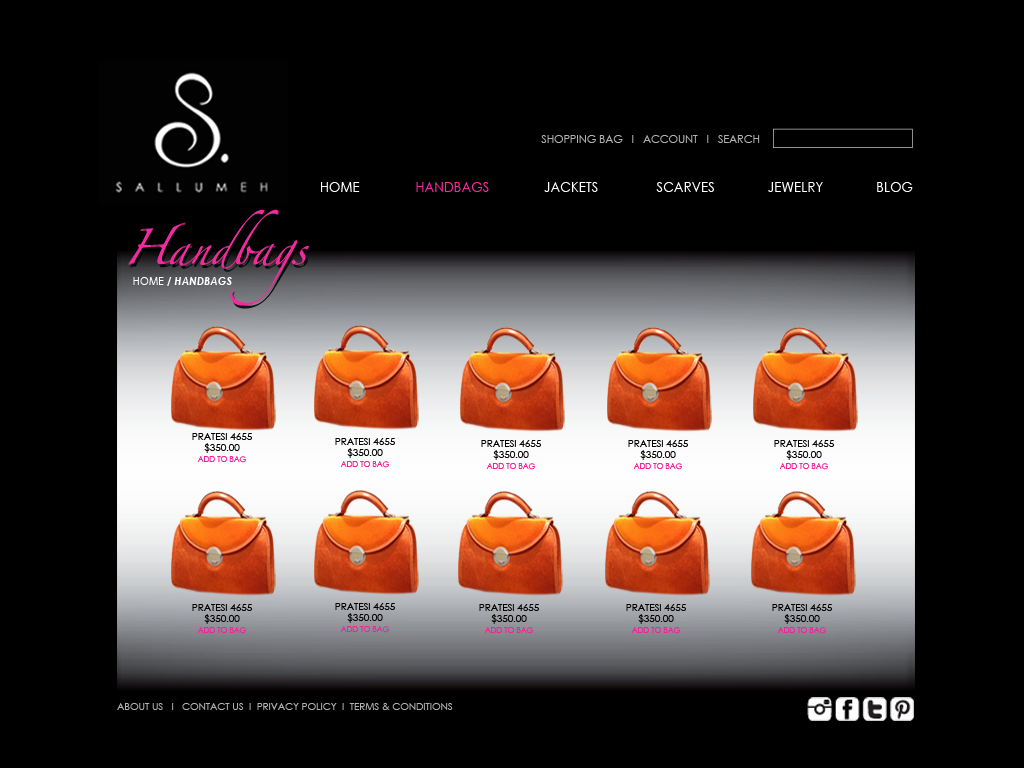
<style>
.page{position:relative;width:1024px;height:768px;background:#000000}
.page>*{position:absolute;margin:0}
.t1{font:10.9px "CenturyGothic";color:#b2b1b1}
.t2{font:14.2px "CenturyGothic";letter-spacing:0.025em;color:#ffffff;scale:0.9 1}
.t3{font:14.2px "CenturyGothic";letter-spacing:0.025em;color:#f12aa0;scale:0.9 1}
.t4{font:11.2px "CenturyGothic-BoldItalic";letter-spacing:0.025em;color:#ffffff;scale:0.9 1}
.t5{font:11.2px "CenturyGothic";letter-spacing:0.025em;color:#ffffff;scale:0.9 1}
.t6{font:10px/11.2px "CenturyGothic";color:#000000}
.t7{font:7.9px/11.2px "CenturyGothic";color:#f3219e}
.t8{font:10px "CenturyGothic";color:#b2b1b1}
</style>
<div class="page">
<p class="t1" style="left:541px;top:135px;width:219px;height:8px">SHOPPING BAG   I   ACCOUNT   I   SEARCH</p>
<p class="t2" style="left:321px;top:182px;width:39px;height:10px">HOME</p>
<p class="t3" style="left:416px;top:182px;width:73px;height:10px">HANDBAGS</p>
<p class="t2" style="left:544px;top:182px;width:54px;height:10px">JACKETS</p>
<p class="t2" style="left:656px;top:182px;width:58px;height:10px">SCARVES</p>
<p class="t2" style="left:768px;top:182px;width:55px;height:10px">JEWELRY</p>
<p class="t2" style="left:877px;top:182px;width:36px;height:10px">BLOG</p>
<p class="t4" style="left:133px;top:277px;width:99px;height:9px"><span class="t5">HOME / </span>HANDBAGS</p>
<p class="t6" style="left:192px;top:433px;width:60px;height:30px;text-align:center">PRATESI 4655<br>$350.00<br><span class="t7">ADD TO BAG</span></p>
<p class="t6" style="left:335px;top:438px;width:60px;height:30px;text-align:center">PRATESI 4655<br>$350.00<br><span class="t7">ADD TO BAG</span></p>
<p class="t6" style="left:481px;top:440px;width:60px;height:30px;text-align:center">PRATESI 4655<br>$350.00<br><span class="t7">ADD TO BAG</span></p>
<p class="t6" style="left:628px;top:440px;width:60px;height:30px;text-align:center">PRATESI 4655<br>$350.00<br><span class="t7">ADD TO BAG</span></p>
<p class="t6" style="left:774px;top:440px;width:60px;height:30px;text-align:center">PRATESI 4655<br>$350.00<br><span class="t7">ADD TO BAG</span></p>
<p class="t6" style="left:192px;top:604px;width:60px;height:30px;text-align:center">PRATESI 4655<br>$350.00<br><span class="t7">ADD TO BAG</span></p>
<p class="t6" style="left:335px;top:603px;width:60px;height:30px;text-align:center">PRATESI 4655<br>$350.00<br><span class="t7">ADD TO BAG</span></p>
<p class="t6" style="left:479px;top:604px;width:60px;height:30px;text-align:center">PRATESI 4655<br>$350.00<br><span class="t7">ADD TO BAG</span></p>
<p class="t6" style="left:626px;top:604px;width:60px;height:30px;text-align:center">PRATESI 4655<br>$350.00<br><span class="t7">ADD TO BAG</span></p>
<p class="t6" style="left:772px;top:604px;width:60px;height:30px;text-align:center">PRATESI 4655<br>$350.00<br><span class="t7">ADD TO BAG</span></p>
<p class="t8" style="left:117px;top:703px;width:336px;height:7px">ABOUT US   I   CONTACT US  I  PRIVACY POLICY  I  TERMS &amp; CONDITIONS</p>
</div>
